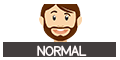
<style>
.page{position:relative;width:120px;height:60px;background:#ffffff}
.page>*{position:absolute;margin:0}
.t1{font:13.4px "Jekyll-Regular";letter-spacing:-0.01em;color:#fff9f9}
</style>
<div class="page">
<p class="t1" style="left:37px;top:45px;width:50px;height:12px">NORMAL</p>
</div>
